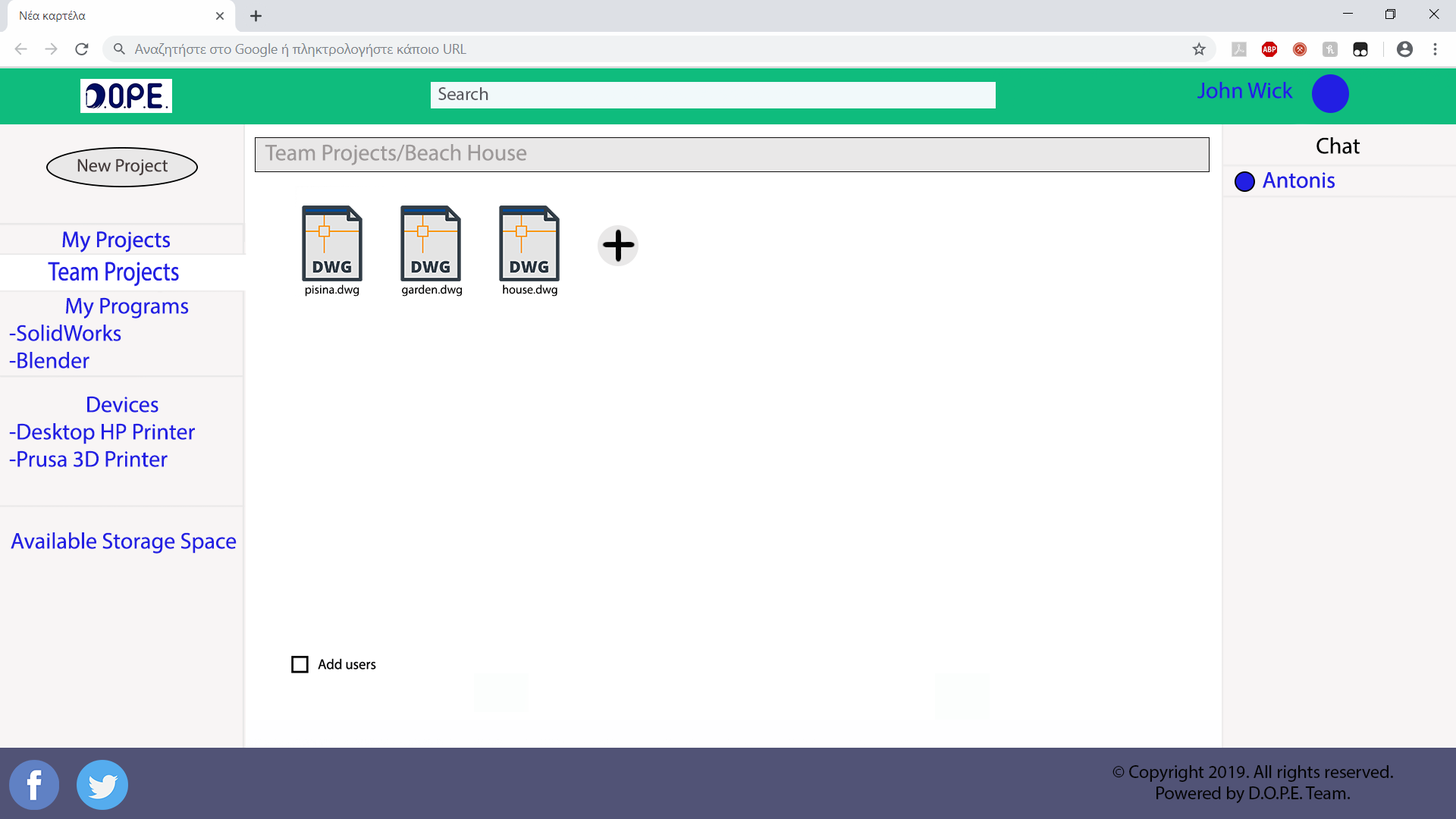
<style>
.page{position:relative;width:1456px;height:819px;background:#ffffff}
.page>*{position:absolute;margin:0}
.t1{font:18.2px "MyriadPro-Regular";color:#57575d}
.t2{font:22.7px "MyriadPro-Regular";color:#221fe3}
.t3{font:22.7px "MyriadPro-Regular";color:#000201}
.t4{font:22.7px "MyriadPro-Regular";color:#9d9999}
.t5{font:18.2px "MyriadPro-Regular";color:#463d3d}
.t6{font:12.1px "MyriadPro-Regular";color:#030202}
.t7{font:18.2px "MyriadPro-Regular";color:#050505}
</style>
<div class="page">
<p class="t1" style="left:438px;top:87px;width:50px;height:13px">Search</p>
<p class="t2" style="left:1197px;top:82px;width:96px;height:17px">John Wick</p>
<p class="t3" style="left:1316px;top:137px;width:44px;height:17px">Chat</p>
<p class="t4" style="left:265px;top:144px;width:262px;height:21px">Team Projects/Beach House</p>
<p class="t5" style="left:77px;top:158px;width:91px;height:18px">New Project</p>
<p class="t6" style="left:305px;top:284px;width:54px;height:13px">pisina.dwg</p>
<p class="t6" style="left:402px;top:284px;width:61px;height:13px">garden.dwg</p>
<p class="t6" style="left:503px;top:284px;width:54px;height:13px">house.dwg</p>
<p class="t2" style="left:9px;top:297px;width:180px;height:72px;text-align:center">My Programs<br>-SolidWorks<br>-Blender</p>
<p class="t2" style="left:87px;top:396px;width:71px;height:17px">Devices</p>
<p class="t2" style="left:9px;top:423px;width:186px;height:44px">-Desktop HP Printer<br>-Prusa 3D Printer</p>
<p class="t2" style="left:11px;top:532px;width:226px;height:22px">Available Storage Space</p>
<p class="t7" style="left:1112px;top:765px;width:281px;height:38px;text-align:center">© Copyright 2019. All rights reserved. Powered by D.O.P.E. Team.</p>
</div>
